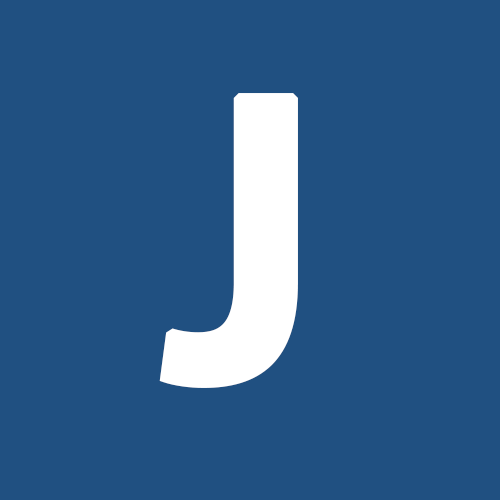
<style>
.page{position:relative;width:500px;height:500px;background:#205081}
.page>*{position:absolute;margin:0}
.t1{font:366px "AdobeGothicStd-Bold";color:#ffffff;font-weight:bold}
</style>
<div class="page">
<p class="t1" style="left:159px;top:93px;width:139px;height:295px">J</p>
</div>
